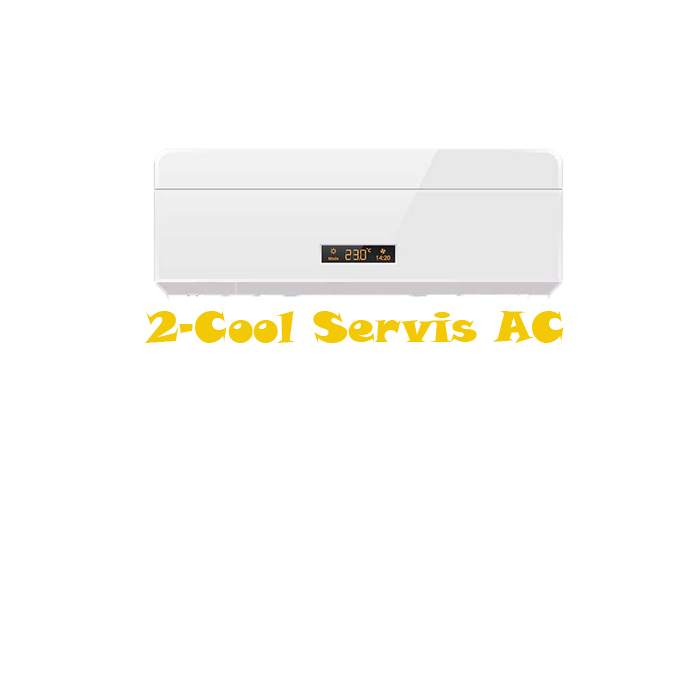
<style>
.page{position:relative;width:700px;height:700px;background:#ffffff}
.page>*{position:absolute;margin:0}
.t1{font:42.2px "SnapITC-Regular";color:#f3c905}
</style>
<div class="page">
<p class="t1" style="left:145px;top:311px;width:419px;height:32px">2-Cool Servis AC</p>
</div>
